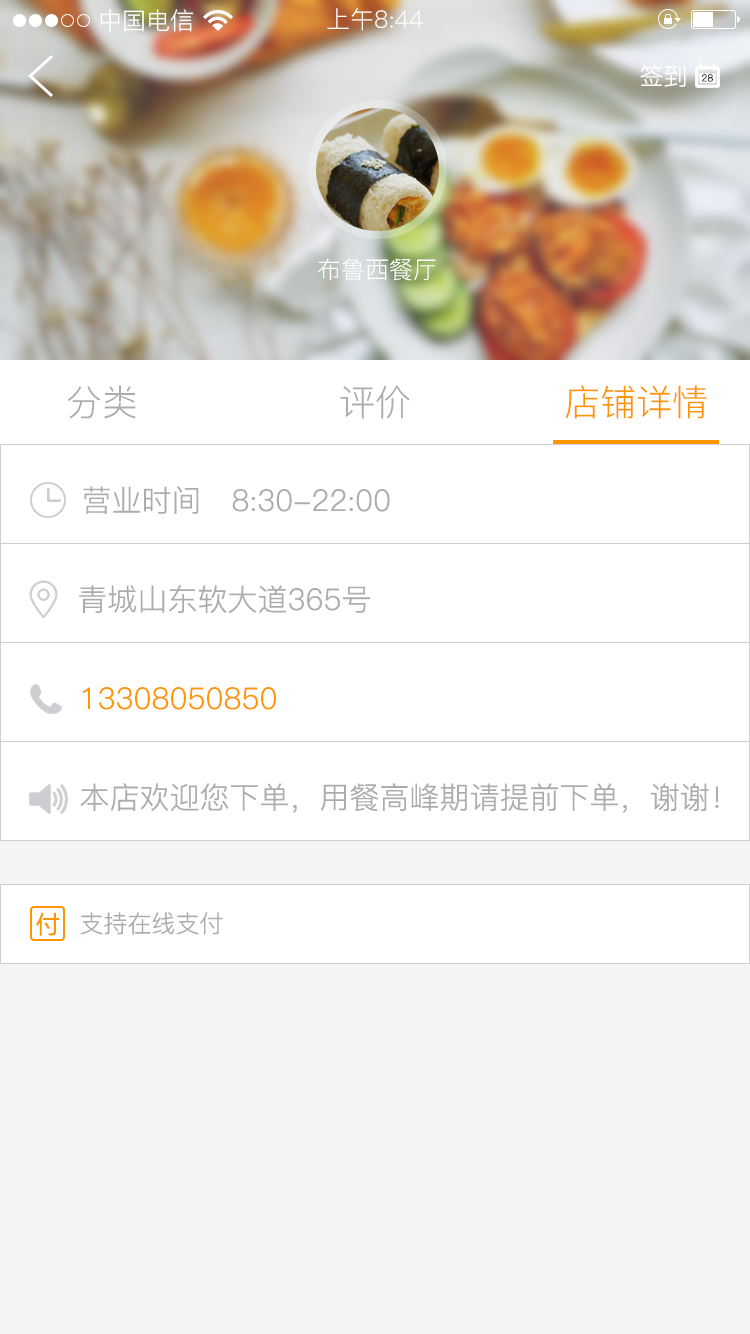
<style>
.page{position:relative;width:750px;height:1334px;background:#ffffff}
.page>*{position:absolute;margin:0}
.t1{font:24px "PingFang-SC-Regular";color:#ffffff}
.t2{font:36px "PingFang-SC-Regular";color:#acacac}
.t3{font:36px "PingFang-SC-Regular";color:#ff9500}
.t4{font:30px "PingFang-SC-Regular";color:#acacac}
.t5{font:30px "PingFang-SC-Regular";color:#ff9500}
.t6{font:24px "MicrosoftYaHei";color:#ff9500}
.t7{font:24px "PingFang-SC-Regular";color:#acacac}
</style>
<div class="page">
<p class="t1" style="left:100px;top:9px;width:94px;height:23px">中国电信</p>
<p class="t1" style="left:327px;top:8px;width:96px;height:23px">上午8:44</p>
<p class="t1" style="left:640px;top:64px;width:46px;height:23px">签到</p>
<p class="t1" style="left:318px;top:258px;width:118px;height:23px">布鲁西餐厅</p>
<p class="t2" style="left:67px;top:385px;width:69px;height:34px">分类</p>
<p class="t2" style="left:340px;top:385px;width:70px;height:34px">评价</p>
<p class="t3" style="left:565px;top:385px;width:142px;height:34px">店铺详情</p>
<p class="t4" style="left:83px;top:486px;width:307px;height:28px">营业时间   8:30-22:00</p>
<p class="t4" style="left:79px;top:585px;width:291px;height:28px">青城山东软大道365号</p>
<p class="t5" style="left:83px;top:687px;width:193px;height:23px">13308050850</p>
<p class="t4" style="left:80px;top:783px;width:639px;height:30px">本店欢迎您下单，用餐高峰期请提前下单，谢谢！</p>
<p class="t6" style="left:36px;top:912px;width:24px;height:24px">付</p>
<p class="t7" style="left:80px;top:912px;width:143px;height:23px">支持在线支付</p>
</div>
